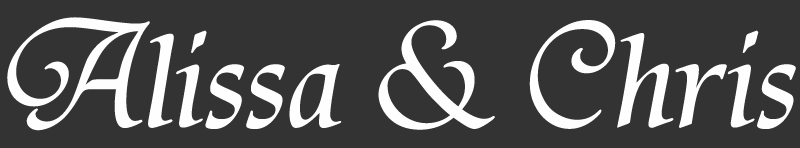
<style>
.page{position:relative;width:800px;height:148px;background:#333333}
.page>*{position:absolute;margin:0}
.t1{font:165.3px "TirantiSolidLetPlain";color:#fefefe}
</style>
<div class="page">
<p class="t1" style="left:7px;top:17px;width:789px;height:114px">Alissa &amp; Chris</p>
</div>
